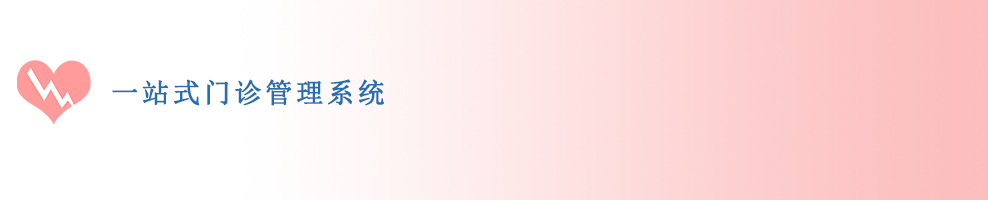
<style>
.page{position:relative;width:988px;height:200px;background:#ffffff}
.page>*{position:absolute;margin:0}
.t1{font:27.3px "SimSun";letter-spacing:0.1em;color:#256eb1;font-weight:bold}
</style>
<div class="page">
<p class="t1" style="left:112px;top:79px;width:272px;height:27px">一站式门诊管理系统</p>
</div>
